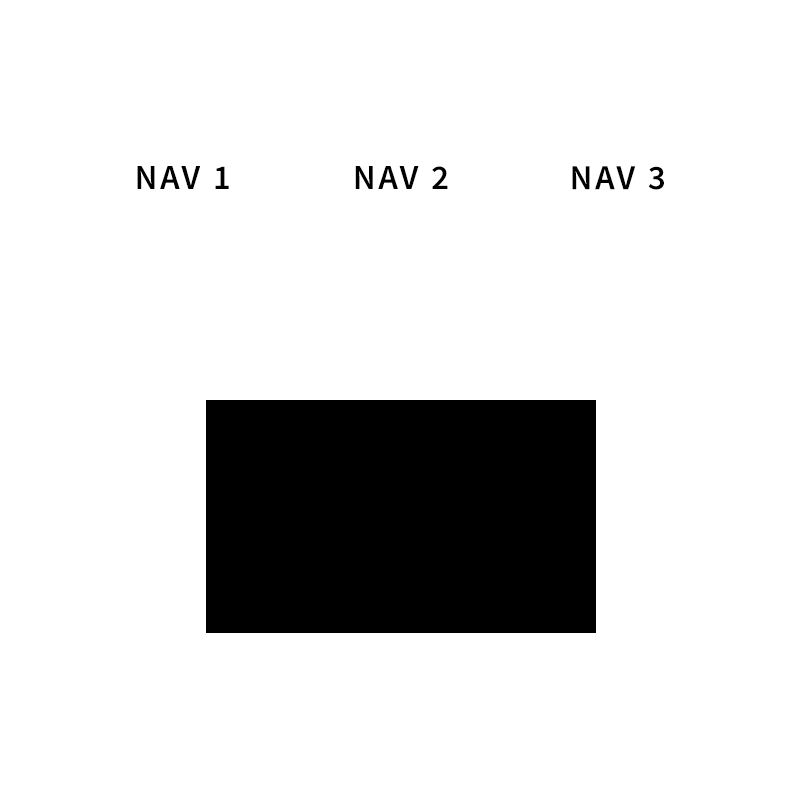
<style>
.page{position:relative;width:800px;height:800px;background:#ffffff}
.page>*{position:absolute;margin:0}
.t1{font:35px "SourceSansPro-Semibold";letter-spacing:0.08em;color:#000000;text-transform:uppercase}
</style>
<div class="page">
<p class="t1" style="left:137px;top:166px;width:92px;height:23px">nav 1</p>
<p class="t1" style="left:355px;top:166px;width:93px;height:23px">nav 2</p>
<p class="t1" style="left:572px;top:166px;width:92px;height:24px">nav 3</p>
</div>
